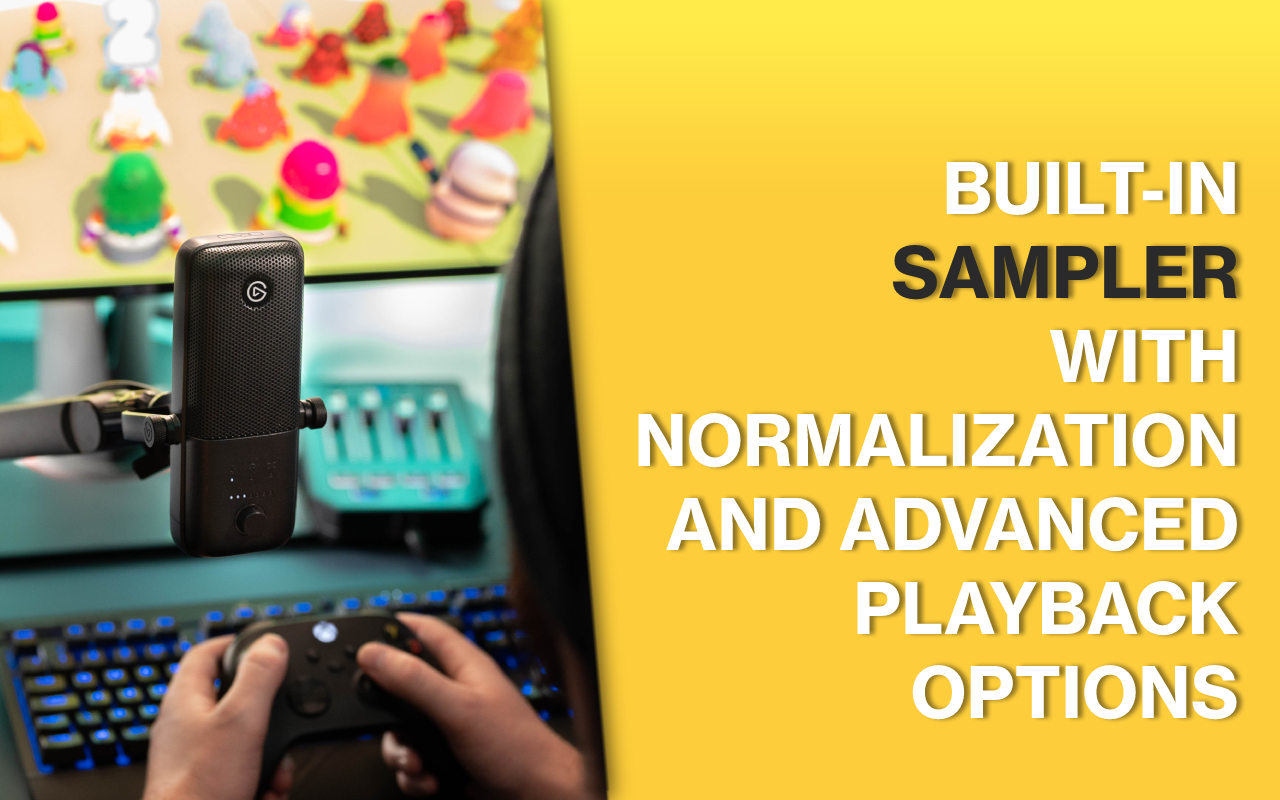
<style>
.page{position:relative;width:1280px;height:800px;background:#fdcd3b}
.page>*{position:absolute;margin:0}
.t1{font:70px "NHaasGroteskTXPro-Bd";color:#ffffff}
.t2{font:70px "NHaasGroteskTXPro-Bd";color:#2a2a2a}
</style>
<div class="page">
<p class="t1" style="left:638px;top:161px;width:601px;height:559px;text-align:right">BUILT-IN<br><span class="t2">SAMPLER<br></span>WITH<br>NORMALIZATION<br>AND ADVANCED<br>PLAYBACK<br>OPTIONS</p>
</div>
